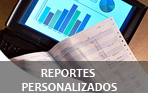
<style>
.page{position:relative;width:148px;height:93px}
.page>*{position:absolute;margin:0}
.t1{font:12px "Candara-Bold";color:#ffffff}
</style>
<div class="page">
<p class="t1" style="left:22px;top:69px;width:95px;height:22px;text-align:center">REPORTES<br> PERSONALIZADOS</p>
</div>
